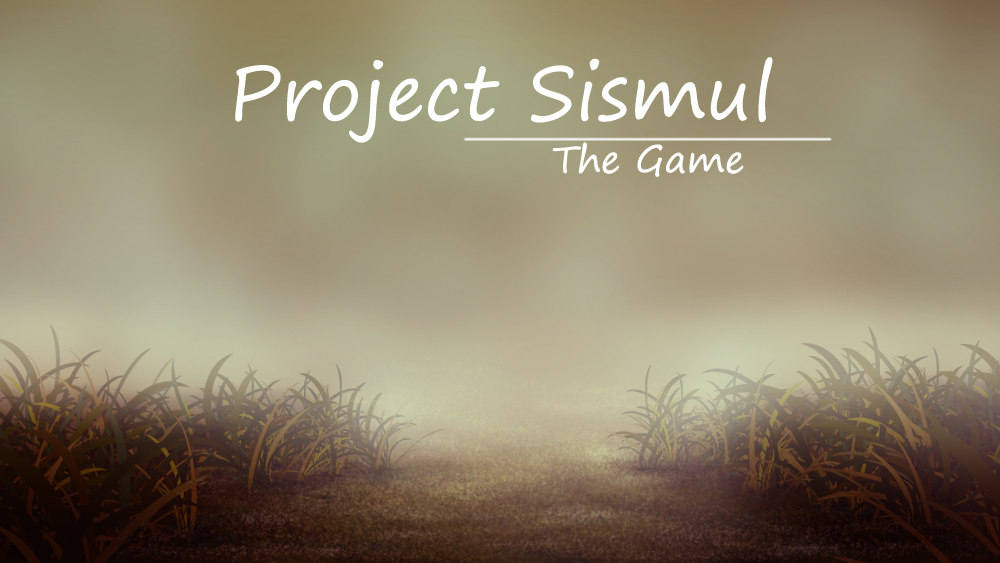
<style>
.page{position:relative;width:1000px;height:563px}
.page>*{position:absolute;margin:0}
.t1{font:75px "SegoePrint";color:#ffffff}
.t2{font:37.5px "SegoePrint";color:#ffffff}
</style>
<div class="page">
<p class="t1" style="left:235px;top:57px;width:538px;height:86px">Project Sismul</p>
<p class="t2" style="left:552px;top:142px;width:192px;height:35px">The Game</p>
</div>
